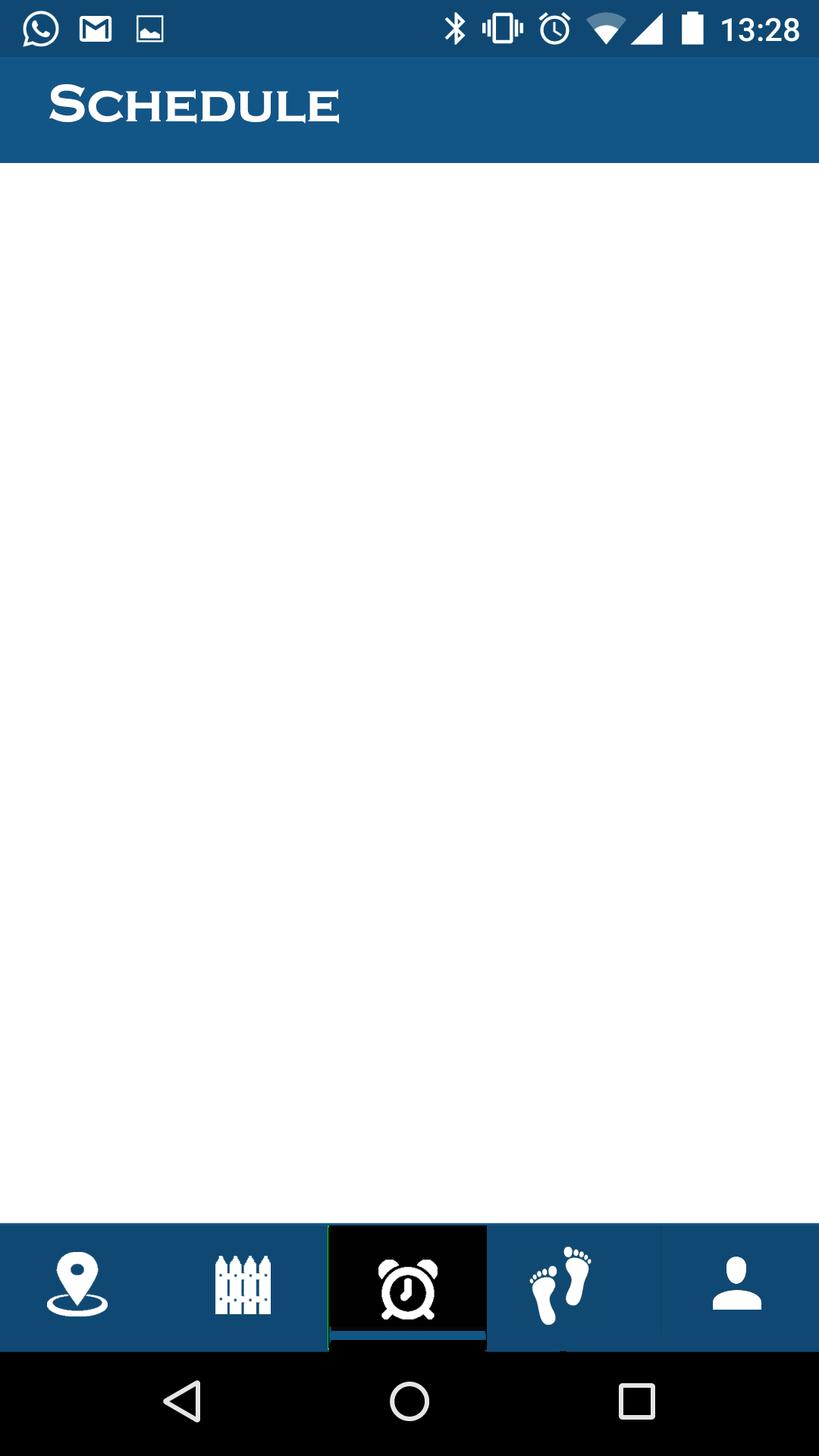
<style>
.page{position:relative;width:819px;height:1456px;background:#ffffff}
.page>*{position:absolute;margin:0}
.t1{font:54.6px "CopperplateGothic-Bold";color:#ffffff}
</style>
<div class="page">
<p class="t1" style="left:49px;top:84px;width:290px;height:40px">Schedule</p>
</div>
